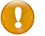
<style>
.page{position:relative;width:45px;height:36px;background:#ffffff}
.page>*{position:absolute;margin:0}
.t1{font:31px "GillSans-Bold";color:#ffffff}
</style>
<div class="page">
<p class="t1" style="left:14px;top:7px;width:8px;height:21px">!</p>
</div>
